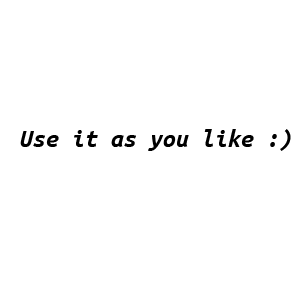
<style>
.page{position:relative;width:300px;height:300px;background:#ffffff}
.page>*{position:absolute;margin:0}
.t1{font:26px "UbuntuMono-BoldItalic";color:#000000}
</style>
<div class="page">
<p class="t1" style="left:20px;top:129px;width:271px;height:22px">Use it as you like :)</p>
</div>
